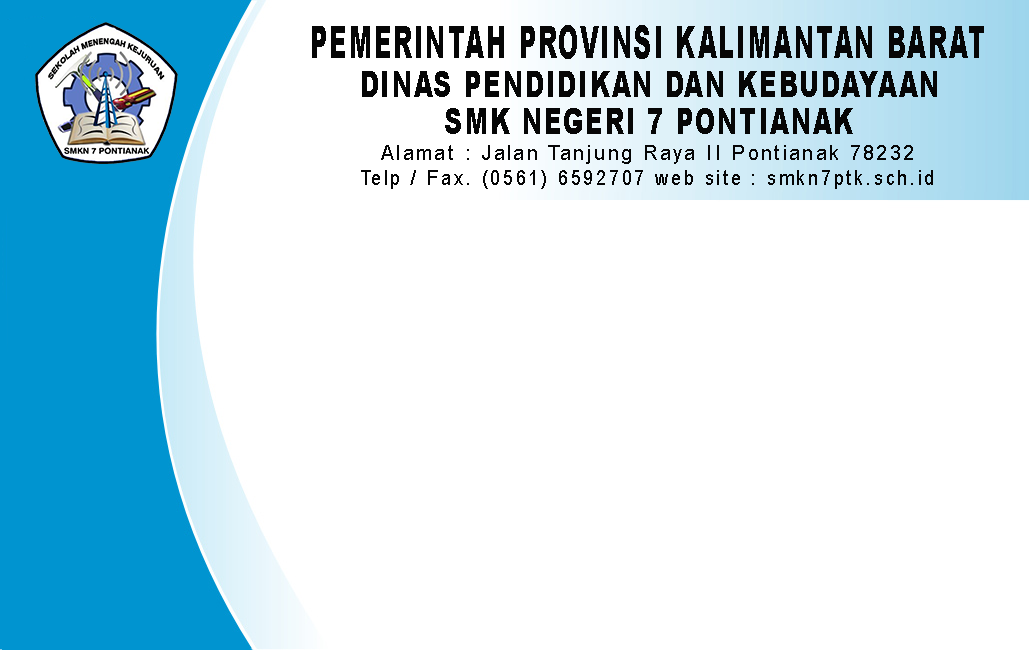
<style>
.page{position:relative;width:1029px;height:650px;background:#ffffff}
.page>*{position:absolute;margin:0}
.t1{font:44.3px "Arial-Black";letter-spacing:0.1em;color:#060606;scale:0.53 1}
.t2{font:36.2px "Arial-Black";letter-spacing:0.1em;color:#060606;scale:0.65 1}
.t3{font:21px "ArialNarrow";letter-spacing:0.1em;color:#060606;scale:1.17 1}
.t4{font:21px "ArialNarrow";letter-spacing:0.1em;color:#060606;scale:1.12 1}
</style>
<div class="page">
<p class="t1" style="left:312px;top:25px;width:672px;height:34px">PEMERINTAH PROVINSI KALIMANTAN BARAT</p>
<p class="t2" style="left:362px;top:71px;width:575px;height:26px">DINAS PENDIDIKAN DAN KEBUDAYAAN</p>
<p class="t2" style="left:445px;top:108px;width:408px;height:26px">SMK NEGERI 7 PONTIANAK</p>
<p class="t3" style="left:381px;top:145px;width:532px;height:19px">Alamat : Jalan Tanjung Raya II Pontianak 78232</p>
<p class="t4" style="left:361px;top:170px;width:572px;height:19px">Telp / Fax. (0561) 6592707 web site : smkn7ptk.sch.id</p>
</div>
